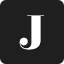
<style>
.page{position:relative;width:64px;height:64px;background:#1f1f1f}
.page>*{position:absolute;margin:0}
.t1{font:48px "MortModern-05LargeBold";letter-spacing:0.05em;color:#ffffff}
</style>
<div class="page">
<p class="t1" style="left:19px;top:15px;width:25px;height:35px">J</p>
</div>
